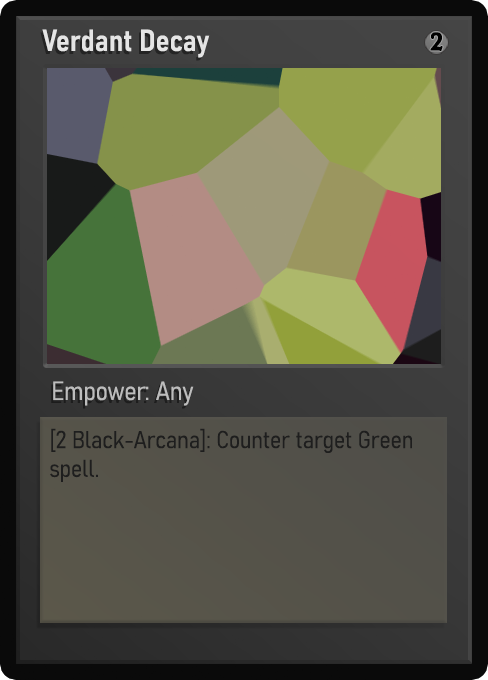
<style>
.page{position:relative;width:488px;height:680px}
.page>*{position:absolute;margin:0}
.t1{font:30px "Bahnschrift-SemiBoldSemiCondensed";color:#f2f2f2;font-weight:bold}
.t2{font:25px "WTRRoycroft";color:#000000;font-weight:bold;scale:1.09 1}
.t3{font:26px "Bahnschrift-LightSemiCondensed";color:#c8c8c8;font-weight:bold}
.t4{font:24px "Bahnschrift-LightSemiCondensed";color:#1e1e1e;font-weight:bold}
</style>
<div class="page">
<p class="t1" style="left:42px;top:29px;width:168px;height:29px;opacity:0.9">Verdant Decay</p>
<p class="t2" style="left:430px;top:32px;width:13px;height:19px">2</p>
<p class="t3" style="left:53px;top:381px;width:141px;height:25px;opacity:0.9">Empower: Any</p>
<p class="t4" style="left:50px;top:428px;width:362px;height:54px">[2 Black-Arcana]: Counter target Green spell.</p>
</div>
